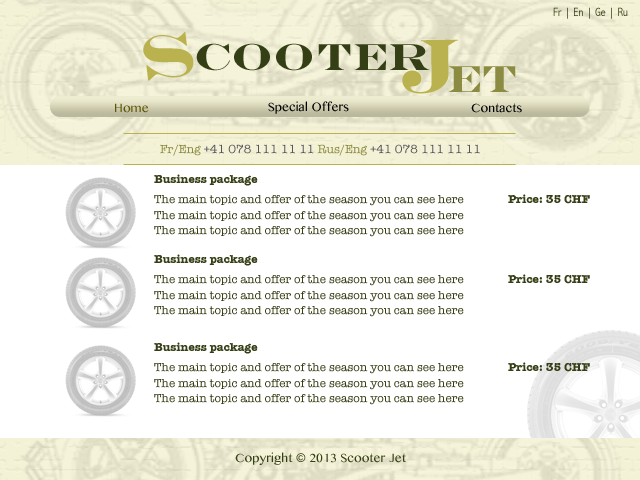
<style>
.page{position:relative;width:640px;height:480px;background:#ffffff}
.page>*{position:absolute;margin:0}
.t1{font:12px "AbadiMT-CondensedLight";letter-spacing:0.005em}
.t2{font:62.6px "EngraversMT-Bold";letter-spacing:0.005em;color:#bab24e}
.t3{font:77px "EngraversMT-Bold";letter-spacing:0.005em;color:#bab24e}
.t4{font:37.8px "EngraversMT-Bold";letter-spacing:0.005em;color:#353f15}
.t5{font:37.8px "EngraversMT-Bold";letter-spacing:0.005em;color:#8b8b41}
.t6{font:12px "BanglaMN";letter-spacing:0.005em;color:#000000}
.t7{font:12px "BanglaMN";letter-spacing:0.005em;color:#5d5604}
.t8{font:12px "BanglaMN";letter-spacing:0.005em;color:#010101}
.t9{font:12px "AmericanTypewriter";letter-spacing:0.005em;color:#56555b}
.t10{font:12px "AmericanTypewriter";letter-spacing:0.005em;color:#8b8b41}
.t11{font:11.6px "AmericanTypewriter-Bold";letter-spacing:0.005em;color:#353f15}
.t12{font:11.6px/15.5px "AmericanTypewriter";letter-spacing:0.005em;color:#353f15}
.t13{font:12px "BanglaMN";letter-spacing:0.005em;color:#353f15}
</style>
<div class="page">
<p class="t1" style="left:553px;top:7px;width:75px;height:12px">Fr | En | Ge | Ru</p>
<p class="t2" style="left:143px;top:32px;width:51px;height:49px;rotate:-7deg">S</p>
<p class="t3" style="left:402px;top:39px;width:56px;height:55px;rotate:-1deg">J</p>
<p class="t4" style="left:196px;top:43px;width:234px;height:28px">cooter</p>
<p class="t5" style="left:448px;top:66px;width:68px;height:26px">et</p>
<p class="t6" style="left:268px;top:101px;width:81px;height:13px">Special Offers</p>
<p class="t7" style="left:115px;top:103px;width:34px;height:10px">Home</p>
<p class="t8" style="left:471px;top:103px;width:51px;height:10px">Contacts</p>
<p class="t9" style="left:160px;top:144px;width:320px;height:12px"><span class="t10">Fr/Eng </span>+41 078 111 11 11 <span class="t10">Rus/Eng </span>+41 078 111 11 11</p>
<p class="t11" style="left:154px;top:174px;width:104px;height:12px">Business package</p>
<p class="t12" style="left:154px;top:195px;width:310px;height:42px">The main topic and offer of the season you can see here<br>The main topic and offer of the season you can see here<br>The main topic and offer of the season you can see here</p>
<p class="t11" style="left:508px;top:194px;width:82px;height:10px">Price: 35 CHF</p>
<p class="t11" style="left:154px;top:254px;width:104px;height:12px">Business package</p>
<p class="t12" style="left:154px;top:275px;width:310px;height:42px">The main topic and offer of the season you can see here<br>The main topic and offer of the season you can see here<br>The main topic and offer of the season you can see here</p>
<p class="t11" style="left:508px;top:274px;width:82px;height:10px">Price: 35 CHF</p>
<p class="t11" style="left:154px;top:342px;width:104px;height:12px">Business package</p>
<p class="t12" style="left:154px;top:363px;width:310px;height:42px">The main topic and offer of the season you can see here<br>The main topic and offer of the season you can see here<br>The main topic and offer of the season you can see here</p>
<p class="t11" style="left:508px;top:362px;width:82px;height:10px">Price: 35 CHF</p>
<p class="t13" style="left:235px;top:452px;width:171px;height:13px">Copyright © 2013 Scooter Jet</p>
<p class="t13" style="left:235px;top:452px;width:171px;height:13px">Copyright © 2013 Scooter Jet</p>
</div>
